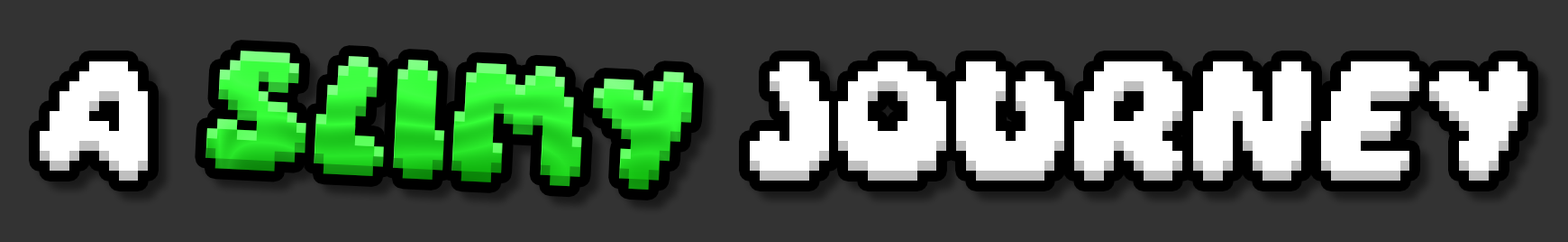
<style>
.page{position:relative;width:1568px;height:242px;background:#333333}
.page>*{position:absolute;margin:0}
.t1{font:105.1px "DaydreamRegular"}
.t2{font:105.1px "DaydreamRegular";color:#ffffff}
</style>
<div class="page">
<p class="t1" style="left:205px;top:50px;width:488px;height:139px;rotate:3deg">slimy</p>
<p class="t2" style="left:40px;top:61px;width:1487px;height:119px">a                    journey</p>
</div>
